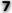
<style>
.page{position:relative;width:12px;height:13px}
.page>*{position:absolute;margin:0}
.t1{font:13.9px "K2D-ExtraBold";color:#000000}
</style>
<div class="page">
<p class="t1" style="left:2px;top:1px;width:9px;height:11px">7</p>
</div>
